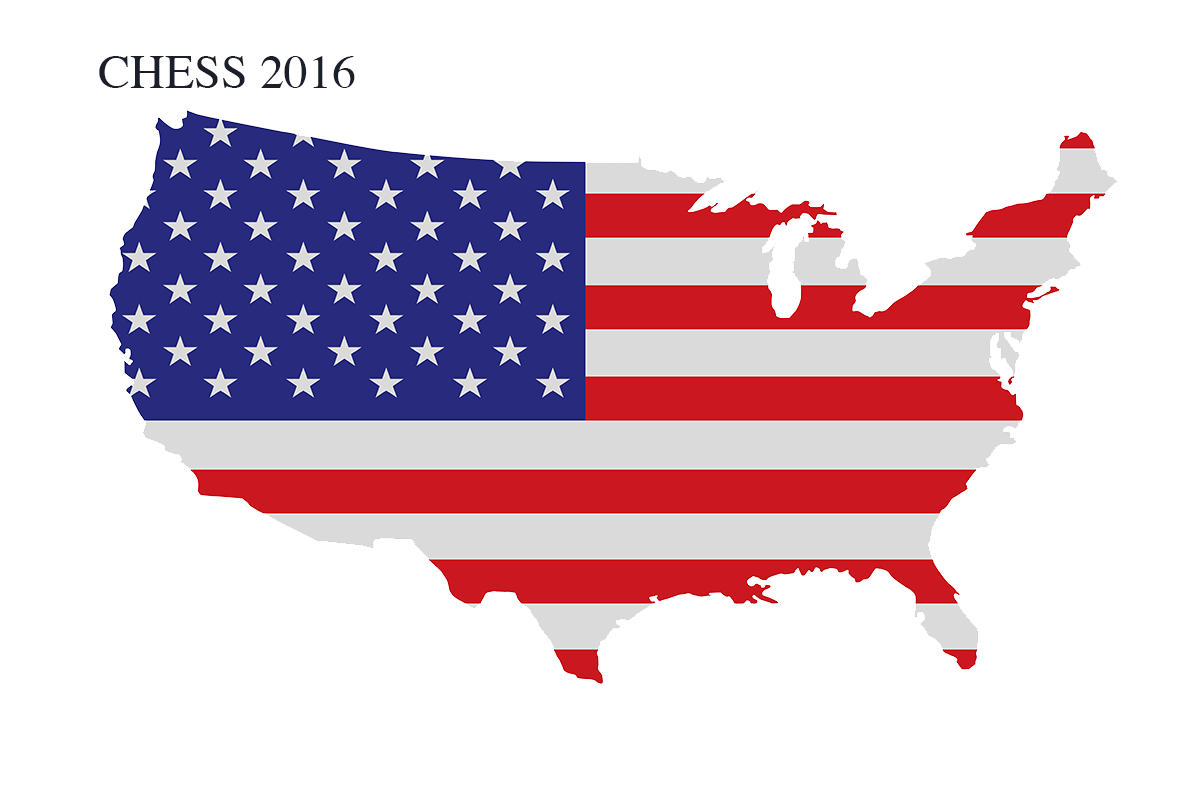
<style>
.page{position:relative;width:1200px;height:800px;background:#ffffff}
.page>*{position:absolute;margin:0}
.t1{font:48px "Times-Roman";color:#1b1f2a;text-transform:uppercase}
</style>
<div class="page">
<p class="t1" style="left:99px;top:56px;width:256px;height:32px">CHESS 2016</p>
</div>
